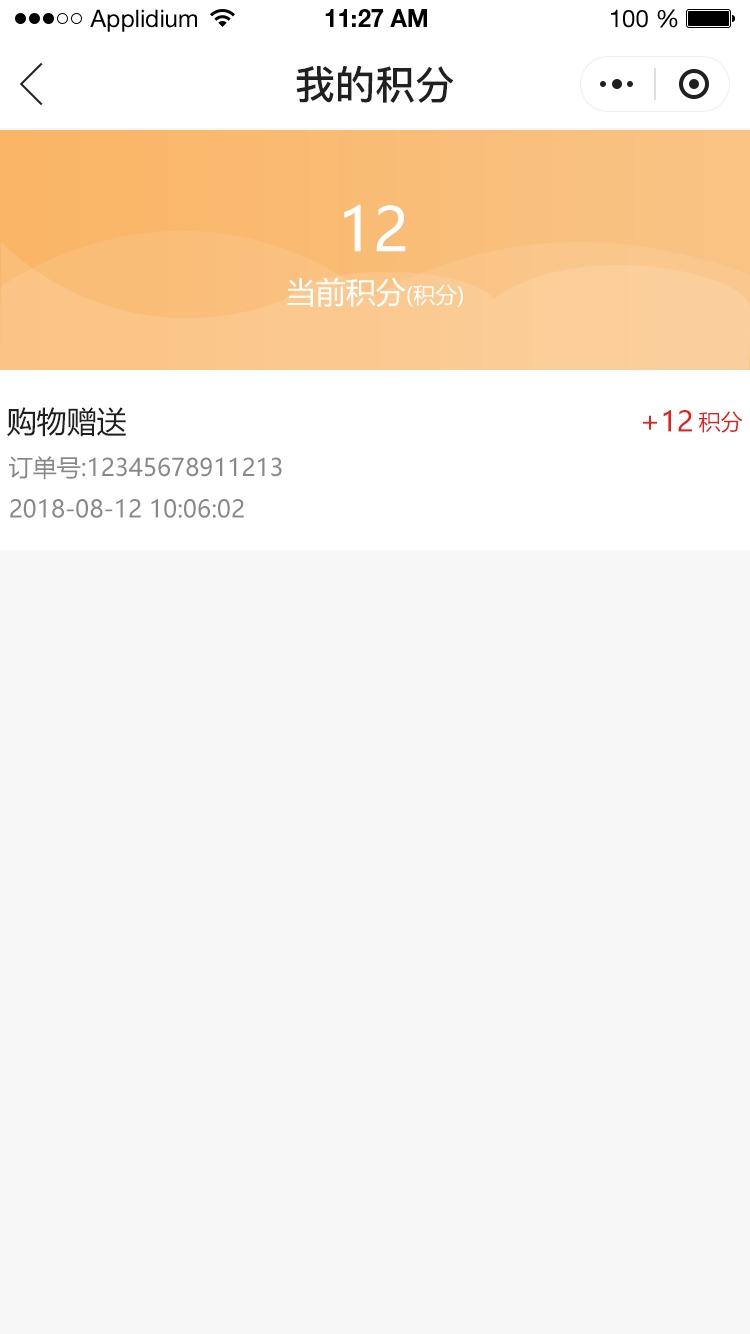
<style>
.page{position:relative;width:750px;height:1334px;background:#f7f7f7}
.page>*{position:absolute;margin:0}
.t1{font:24px "HelveticaNeueLTStd-Roman";color:#000000}
.t2{font:24px "HelveticaNeueLTStd-Bd";color:#000000}
.t3{font:40px "PingFang-SC-Bold";color:#202020;text-transform:uppercase}
.t4{font:60px "MicrosoftYaHei";color:#ffffff;text-transform:uppercase}
.t5{font:30px "MicrosoftYaHei";color:#ffffff;text-transform:uppercase}
.t6{font:22px "MicrosoftYaHei";color:#ffffff;text-transform:uppercase}
.t7{font:30px "MicrosoftYaHei";color:#202020;text-transform:uppercase}
.t8{font:28px "MicrosoftYaHei";color:#e61f18;text-transform:uppercase}
.t9{font:22px "MicrosoftYaHei";color:#e61f18;text-transform:uppercase}
.t10{font:24px "MicrosoftYaHei";color:#888888;text-transform:uppercase}
</style>
<div class="page">
<p class="t1" style="left:90px;top:9px;width:107px;height:23px">Applidium</p>
<p class="t2" style="left:325px;top:9px;width:102px;height:18px">11:27 AM</p>
<p class="t1" style="left:611px;top:9px;width:67px;height:19px">100 %</p>
<p class="t3" style="left:296px;top:65px;width:158px;height:38px">我的积分</p>
<p class="t4" style="left:344px;top:204px;width:62px;height:48px">12</p>
<p class="t5" style="left:287px;top:277px;width:176px;height:30px">当前积分<span class="t6">(积分)</span></p>
<p class="t7" style="left:7px;top:407px;width:120px;height:30px">购物赠送</p>
<p class="t8" style="left:643px;top:410px;width:49px;height:22px">+12</p>
<p class="t9" style="left:699px;top:411px;width:44px;height:22px">积分</p>
<p class="t10" style="left:9px;top:456px;width:273px;height:24px">订单号:12345678911213</p>
<p class="t10" style="left:10px;top:499px;width:234px;height:19px">2018-08-12 10:06:02</p>
</div>
